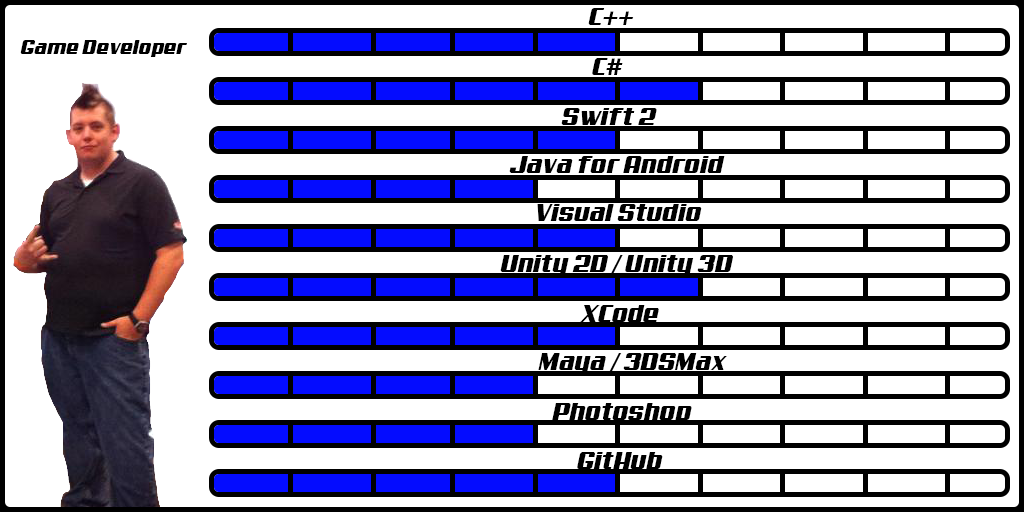
<style>
.page{position:relative;width:1024px;height:512px;background:#ffffff}
.page>*{position:absolute;margin:0}
.t1{font:25px "Aero";color:#000000}
.t2{font:20px "Aero";color:#000000}
</style>
<div class="page">
<p class="t1" style="left:588px;top:8px;width:46px;height:17px">C++</p>
<p class="t2" style="left:20px;top:40px;width:167px;height:17px">Game Developer</p>
<p class="t1" style="left:592px;top:58px;width:31px;height:17px">C#</p>
<p class="t1" style="left:561px;top:108px;width:96px;height:17px">Swift 2</p>
<p class="t1" style="left:509px;top:156px;width:216px;height:17px">Java for Android</p>
<p class="t1" style="left:537px;top:204px;width:165px;height:17px">Visual Studio</p>
<p class="t1" style="left:500px;top:255px;width:233px;height:20px">Unity 2D / Unity 3D</p>
<p class="t1" style="left:580px;top:305px;width:79px;height:17px">XCode</p>
<p class="t1" style="left:538px;top:353px;width:189px;height:20px">Maya / 3DSMax</p>
<p class="t1" style="left:552px;top:403px;width:140px;height:20px">Photoshop</p>
<p class="t1" style="left:577px;top:452px;width:86px;height:17px">GitHub</p>
</div>
